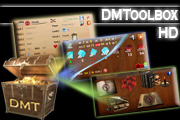
<style>
.page{position:relative;width:180px;height:120px;background:#000000}
.page>*{position:absolute;margin:0}
.t1{font:16.8px "CopperplateGothic-Bold";color:#ffffff;scale:0.71 1}
</style>
<div class="page">
<p class="t1" style="left:101px;top:8px;width:78px;height:13px">DMToolbox</p>
<p class="t1" style="left:158px;top:27px;width:20px;height:11px">HD</p>
</div>
